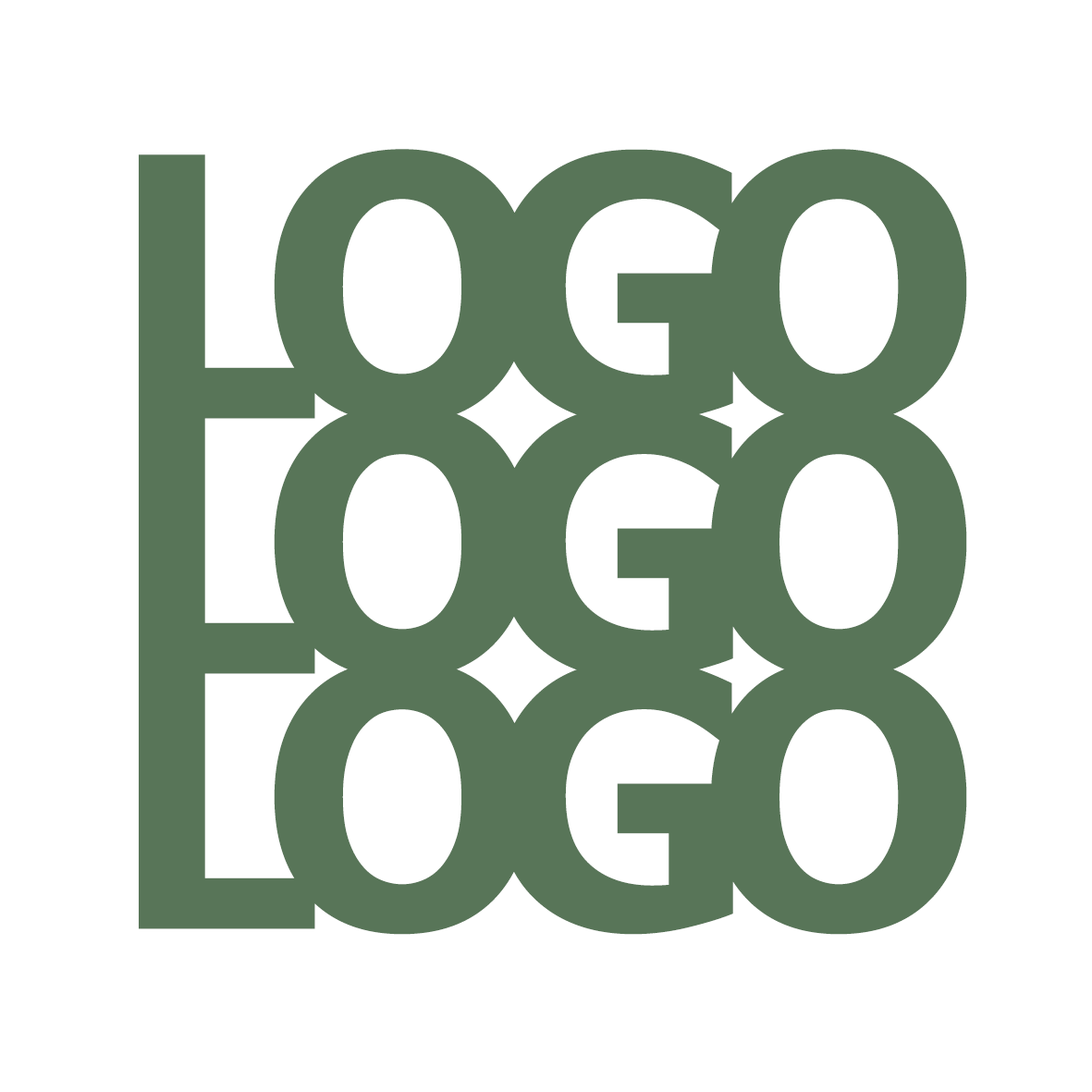
<style>
.page{position:relative;width:1092px;height:1092px;background:#ffffff}
.page>*{position:absolute;margin:0}
.t1{font:362.4px "Tahoma-Bold";letter-spacing:-0.3em;color:#587558;text-transform:uppercase}
</style>
<div class="page">
<p class="t1" style="left:139px;top:149px;width:828px;height:275px">logo</p>
<p class="t1" style="left:139px;top:404px;width:828px;height:276px">logo</p>
<p class="t1" style="left:139px;top:659px;width:828px;height:276px">logo</p>
</div>
